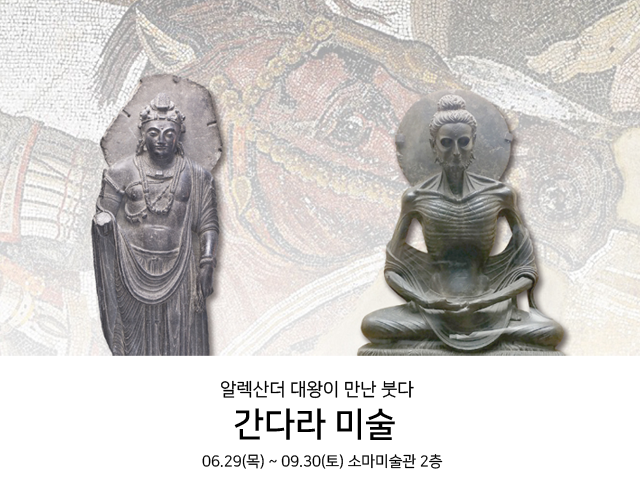
<style>
.page{position:relative;width:640px;height:488px;background:#ffffff}
.page>*{position:absolute;margin:0}
.t1{font:18px "NanumSquareR";color:#000000}
.t2{font:34px "NanumSquareB";color:#000000}
.t3{font:15px "NanumSquareR";color:#000000}
</style>
<div class="page">
<p class="t1" style="left:221px;top:380px;width:193px;height:19px">알렉산더 대왕이 만난 붓다</p>
<p class="t2" style="left:234px;top:408px;width:161px;height:32px">간다라 미술</p>
<p class="t3" style="left:202px;top:454px;width:241px;height:15px">06.29(목) ~ 09.30(토) 소마미술관 2층</p>
</div>
